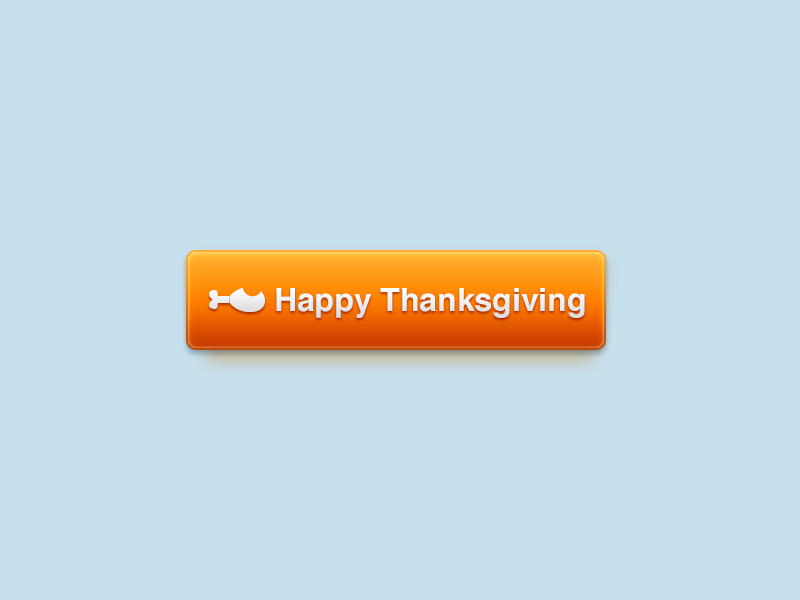
<style>
.page{position:relative;width:800px;height:600px;background:#c7e0ed}
.page>*{position:absolute;margin:0}
.t1{font:32px "Helvetica-Bold";color:#ffffff}
</style>
<div class="page">
<p class="t1" style="left:276px;top:288px;width:309px;height:30px">Happy Thanksgiving</p>
</div>
